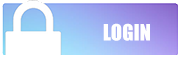
<style>
.page{position:relative;width:181px;height:58px;background:#ffffff}
.page>*{position:absolute;margin:0}
.t1{font:20.8px "Impact";color:#ffffff}
</style>
<div class="page">
<p class="t1" style="left:103px;top:23px;width:47px;height:18px">LOGIN</p>
</div>
